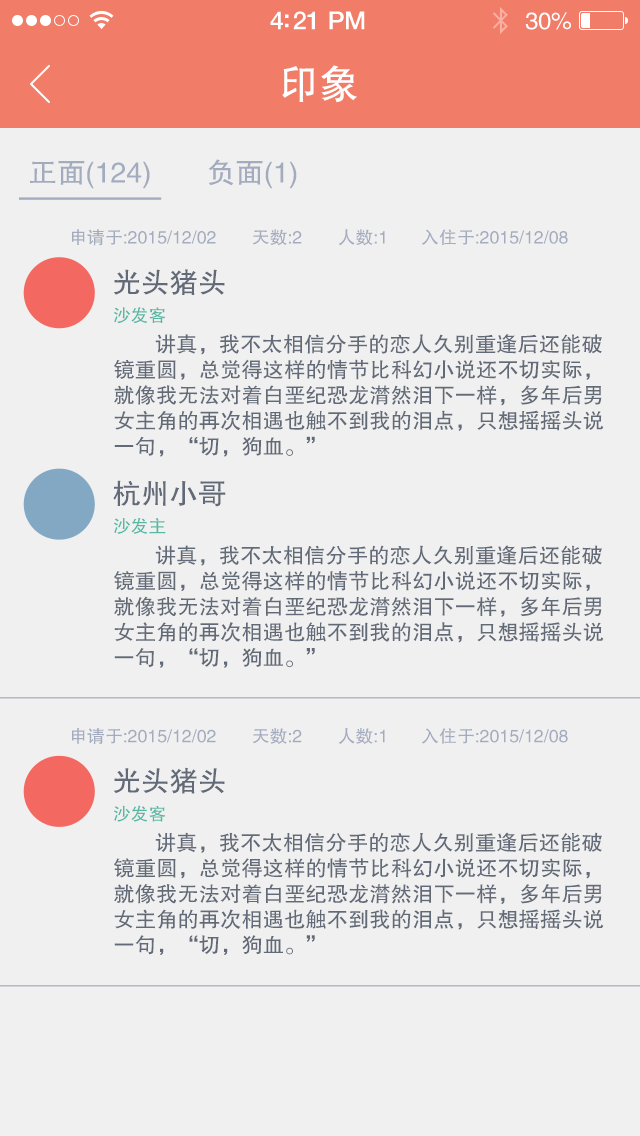
<style>
.page{position:relative;width:640px;height:1136px;background:#f0f0f0}
.page>*{position:absolute;margin:0}
.t1{font:25px "HelveticaNeue-Medium";letter-spacing:-0.02em;color:#ffffff}
.t2{font:24px "FZHTJW--GB1-0";letter-spacing:-0.02em;color:#ffffff}
.t3{font:40px "FZHTJW--GB1-0";color:#ffffff}
.t4{font:28.4px "FZHTJW--GB1-0";color:#a3abbe}
.t5{font:17.8px "FZHTJW--GB1-0";color:#a3abbe}
.t6{font:28.4px "FZHTJW--GB1-0";color:#626a77}
.t7{font:17.8px "FZHTJW--GB1-0";color:#56b7a4}
.t8{font:21.3px "FZHTJW--GB1-0";color:#626a77}
</style>
<div class="page">
<p class="t1" style="left:270px;top:11px;width:95px;height:19px">4:21 PM</p>
<p class="t2" style="left:525px;top:12px;width:46px;height:18px">30%</p>
<p class="t3" style="left:282px;top:65px;width:75px;height:38px">印象</p>
<p class="t4" style="left:30px;top:160px;width:120px;height:29px">正面(124)</p>
<p class="t4" style="left:208px;top:159px;width:89px;height:30px">负面(1)</p>
<p class="t5" style="left:72px;top:229px;width:144px;height:17px">申请于:2015/12/02</p>
<p class="t5" style="left:252px;top:229px;width:50px;height:17px">天数:2</p>
<p class="t5" style="left:338px;top:229px;width:47px;height:17px">人数:1</p>
<p class="t5" style="left:421px;top:229px;width:147px;height:16px">入住于:2015/12/08</p>
<p class="t6" style="left:113px;top:269px;width:112px;height:26px">光头猪头</p>
<p class="t7" style="left:114px;top:307px;width:52px;height:17px">沙发客</p>
<p class="t8" style="left:114px;top:334px;width:490px;height:123px">讲真，我不太相信分手的恋人久别重逢后还能破<br>镜重圆，总觉得这样的情节比科幻小说还不切实际，<br>就像我无法对着白垩纪恐龙潸然泪下一样，多年后男<br>女主角的再次相遇也触不到我的泪点，只想摇摇头说<br>一句，“切，狗血。”</p>
<p class="t6" style="left:113px;top:480px;width:113px;height:27px">杭州小哥</p>
<p class="t7" style="left:114px;top:518px;width:52px;height:16px">沙发主</p>
<p class="t8" style="left:114px;top:545px;width:490px;height:123px">讲真，我不太相信分手的恋人久别重逢后还能破<br>镜重圆，总觉得这样的情节比科幻小说还不切实际，<br>就像我无法对着白垩纪恐龙潸然泪下一样，多年后男<br>女主角的再次相遇也触不到我的泪点，只想摇摇头说<br>一句，“切，狗血。”</p>
<p class="t5" style="left:72px;top:728px;width:144px;height:16px">申请于:2015/12/02</p>
<p class="t5" style="left:252px;top:728px;width:50px;height:16px">天数:2</p>
<p class="t5" style="left:338px;top:728px;width:47px;height:16px">人数:1</p>
<p class="t5" style="left:421px;top:728px;width:147px;height:16px">入住于:2015/12/08</p>
<p class="t6" style="left:113px;top:767px;width:112px;height:27px">光头猪头</p>
<p class="t7" style="left:114px;top:805px;width:52px;height:17px">沙发客</p>
<p class="t8" style="left:114px;top:832px;width:490px;height:123px">讲真，我不太相信分手的恋人久别重逢后还能破<br>镜重圆，总觉得这样的情节比科幻小说还不切实际，<br>就像我无法对着白垩纪恐龙潸然泪下一样，多年后男<br>女主角的再次相遇也触不到我的泪点，只想摇摇头说<br>一句，“切，狗血。”</p>
</div>
